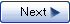
<style>
.page{position:relative;width:70px;height:24px}
.page>*{position:absolute;margin:0}
.t1{font:12px "MicrosoftSansSerif";letter-spacing:0.025em;color:#000000}
</style>
<div class="page">
<p class="t1" style="left:21px;top:7px;width:25px;height:9px">Next</p>
</div>
